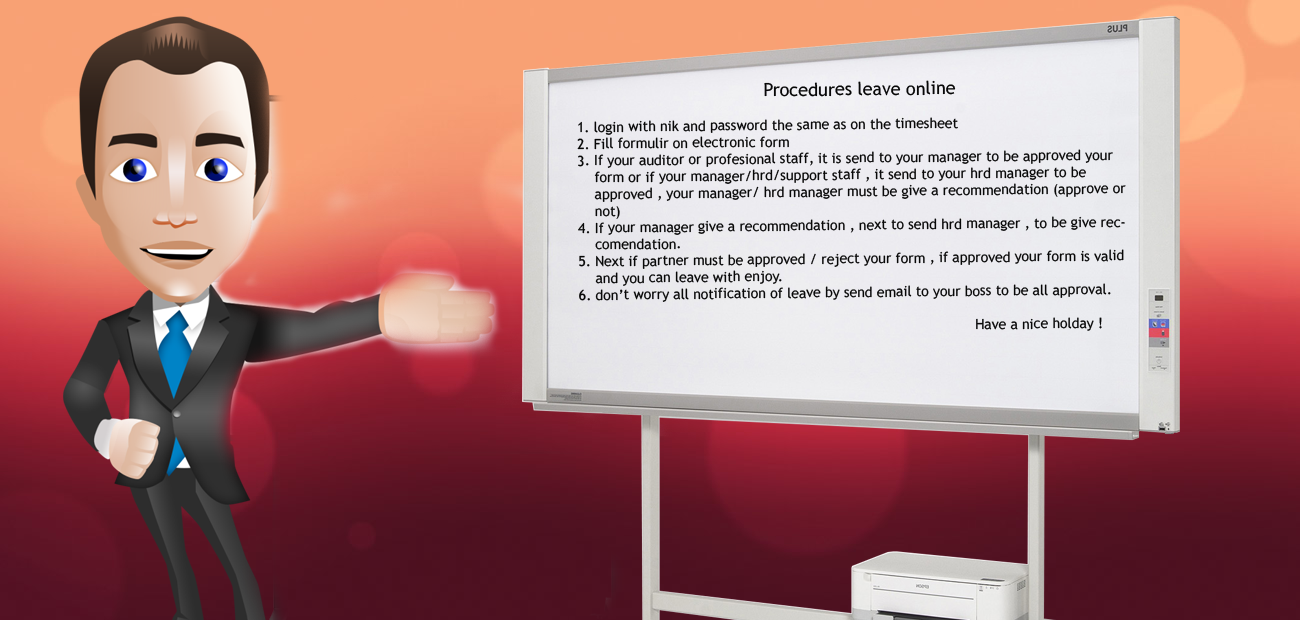
<style>
.page{position:relative;width:1300px;height:620px}
.page>*{position:absolute;margin:0}
.t1{font:14px "TrebuchetMS";color:#080808}
.t2{font:18px "TrebuchetMS";color:#080808}
</style>
<div class="page">
<p class="t1" style="left:577px;top:80px;width:549px;height:251px;text-align:center;rotate:-1deg"><span class="t2">Procedures leave online<br></span><br>1. login with nik and password the same as on the timesheet<br>2. Fill formulir on electronic form<br>3. If your auditor or profesional staff, it is send to your manager to be approved your       form or if your manager/hrd/support staff , it send to your hrd manager to be      <br>    approved , your manager/ hrd manager must be give a recommendation (approve or    <br>    not) <br>4. If your manager give a recommendation , next to send hrd manager , to be give rec-<br>    comendation.<br>5. Next if partner must be approved / reject your form , if approved your form is valid<br>    and you can leave with enjoy.<br>6. don’t worry all notification of leave by send email to your boss to be all approval.<br><br>           Have a nice holday !</p>
</div>
